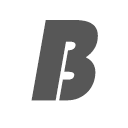
<style>
.page{position:relative;width:128px;height:128px;background:#ffffff}
.page>*{position:absolute;margin:0}
.t1{font:120.4px "Bauhaus93";letter-spacing:0.1em;color:#575757;font-style:italic}
</style>
<div class="page">
<p class="t1" style="left:31px;top:20px;width:67px;height:81px">B</p>
</div>
